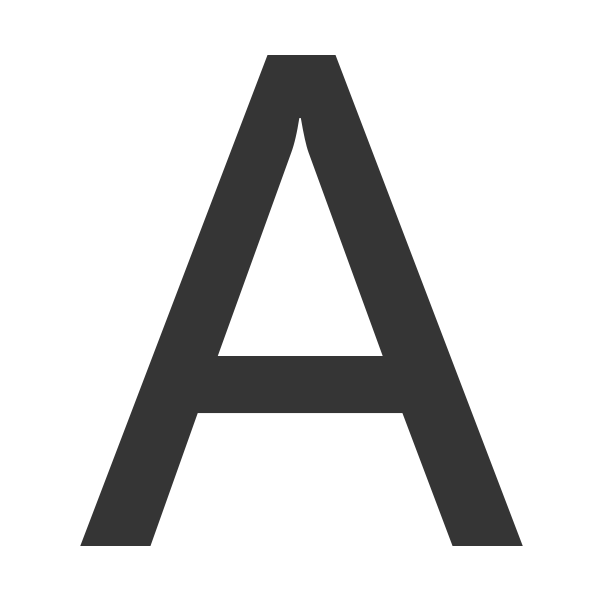
<style>
.page{position:relative;width:600px;height:600px;background:#ffffff}
.page>*{position:absolute;margin:0}
.t1{font:650px "MicrosoftYaHei";color:#353535}
</style>
<div class="page">
<p class="t1" style="left:80px;top:55px;width:443px;height:491px">A</p>
</div>
